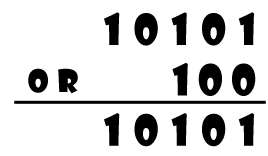
<style>
.page{position:relative;width:268px;height:156px;background:#ffffff}
.page>*{position:absolute;margin:0}
.t1{font:42px "ShowcardGothic-Reg";letter-spacing:0.3em;color:#000000}
.t2{font:42px "ShowcardGothic-Reg";letter-spacing:0.2em;color:#000000}
.t3{font:30px "ShowcardGothic-Reg";letter-spacing:0.3em;color:#000000}
</style>
<div class="page">
<p class="t1" style="left:104px;top:12px;width:152px;height:135px;text-align:right">10101<br><span class="t2">100<br></span>10101</p>
<p class="t3" style="left:28px;top:68px;width:50px;height:26px">OR</p>
</div>
